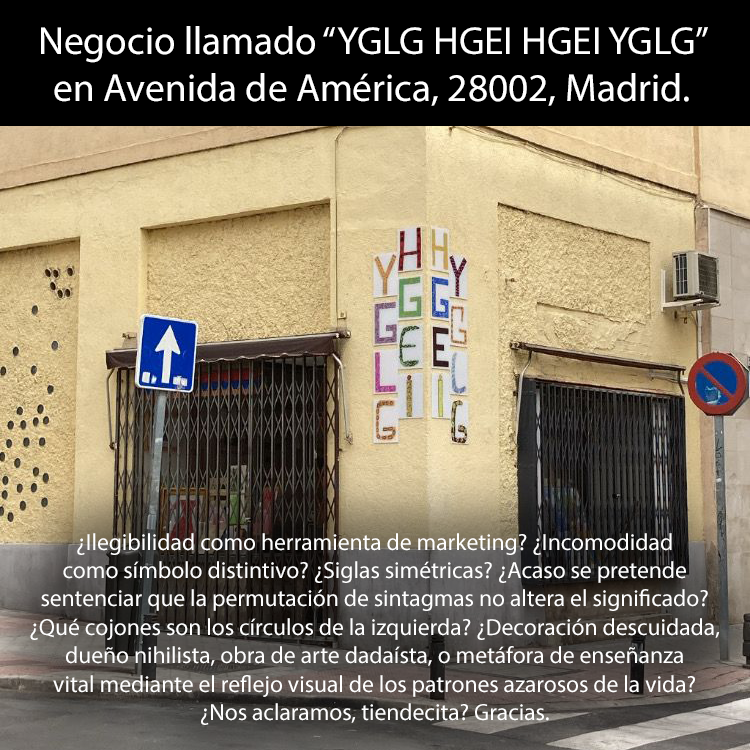
<style>
.page{position:relative;width:750px;height:750px}
.page>*{position:absolute;margin:0}
.t1{font:39.4px "MyriadPro-Regular";color:#ffffff}
.t2{font:23.5px "MyriadPro-Regular";color:#ffffff}
</style>
<div class="page">
<p class="t1" style="left:41px;top:26px;width:667px;height:80px;text-align:center">Negocio llamado “YGLG HGEI HGEI YGLG”<br>en Avenida de América, 28002, Madrid.</p>
<p class="t2" style="left:30px;top:533px;width:690px;height:192px;text-align:center">¿Ilegibilidad como herramienta de marketing? ¿Incomodidad<br>como símbolo distintivo? ¿Siglas simétricas? ¿Acaso se pretende<br>sentenciar que la permutación de sintagmas no altera el significado?<br>¿Qué cojones son los círculos de la izquierda? ¿Decoración descuidada,<br>dueño nihilista, obra de arte dadaísta, o metáfora de enseñanza<br>vital mediante el reflejo visual de los patrones azarosos de la vida?<br>¿Nos aclaramos, tiendecita? Gracias.</p>
</div>
